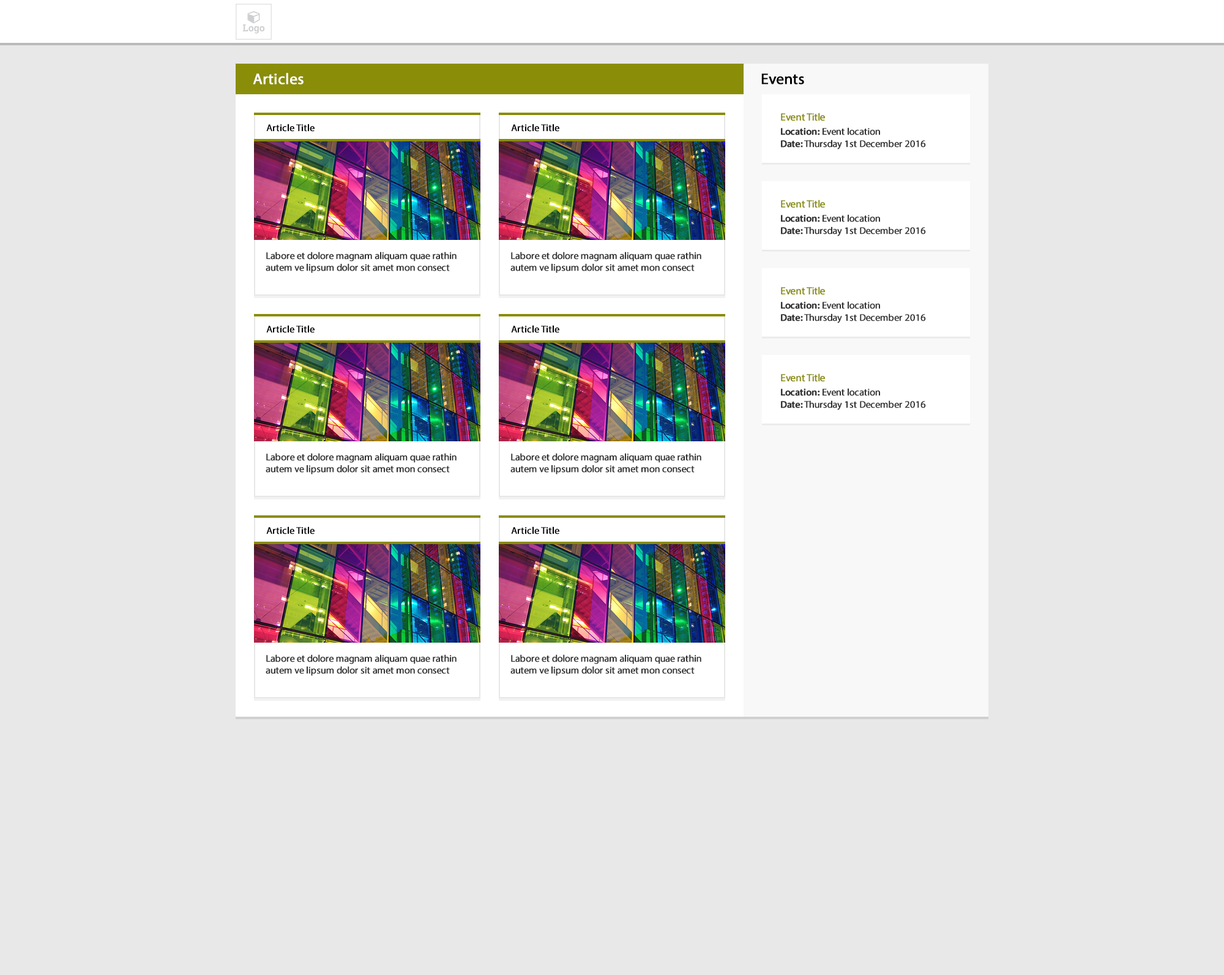
<style>
.page{position:relative;width:1224px;height:975px;background:#e8e8e8}
.page>*{position:absolute;margin:0}
.t1{font:15.3px "MyriadPro-Regular";color:#ffffff;font-weight:bold}
.t2{font:15.3px "MyriadPro-Regular";color:#000000;font-weight:bold}
.t3{font:10.4px "MyriadPro-Regular";letter-spacing:-0.02em;color:#8a8d08;font-weight:bold}
.t4{font:9.8px "MyriadPro-Regular";color:#000000;font-weight:bold}
.t5{font:9.8px "MyriadPro-Regular";letter-spacing:-0.02em;color:#333333;font-weight:bold}
.t6{font:9.8px "MyriadPro-Semibold";letter-spacing:-0.02em;color:#333333;font-weight:bold}
</style>
<div class="page">
<p class="t1" style="left:253px;top:73px;width:50px;height:11px">Articles</p>
<p class="t2" style="left:761px;top:73px;width:43px;height:11px">Events</p>
<p class="t3" style="left:781px;top:113px;width:44px;height:8px">Event Title</p>
<p class="t4" style="left:266px;top:124px;width:48px;height:8px">Article Title</p>
<p class="t4" style="left:511px;top:124px;width:48px;height:8px">Article Title</p>
<p class="t5" style="left:781px;top:127px;width:99px;height:8px"><span class="t6">Location:</span> Event location</p>
<p class="t5" style="left:781px;top:139px;width:145px;height:10px"><span class="t6">Date:</span> Thursday 1st December 2016</p>
<p class="t3" style="left:781px;top:199px;width:44px;height:9px">Event Title</p>
<p class="t5" style="left:781px;top:214px;width:99px;height:8px"><span class="t6">Location:</span> Event location</p>
<p class="t5" style="left:781px;top:226px;width:145px;height:10px"><span class="t6">Date:</span> Thursday 1st December 2016</p>
<p class="t5" style="left:266px;top:251px;width:190px;height:22px">Labore et dolore magnam aliquam quae rathin autem ve lipsum dolor sit amet mon consect</p>
<p class="t5" style="left:510px;top:251px;width:191px;height:22px">Labore et dolore magnam aliquam quae rathin autem ve lipsum dolor sit amet mon consect</p>
<p class="t3" style="left:781px;top:286px;width:44px;height:9px">Event Title</p>
<p class="t5" style="left:781px;top:301px;width:99px;height:8px"><span class="t6">Location:</span> Event location</p>
<p class="t5" style="left:781px;top:313px;width:145px;height:10px"><span class="t6">Date:</span> Thursday 1st December 2016</p>
<p class="t4" style="left:266px;top:325px;width:48px;height:8px">Article Title</p>
<p class="t4" style="left:511px;top:325px;width:48px;height:8px">Article Title</p>
<p class="t3" style="left:781px;top:373px;width:44px;height:9px">Event Title</p>
<p class="t5" style="left:781px;top:388px;width:99px;height:8px"><span class="t6">Location:</span> Event location</p>
<p class="t5" style="left:781px;top:400px;width:145px;height:10px"><span class="t6">Date:</span> Thursday 1st December 2016</p>
<p class="t5" style="left:266px;top:453px;width:190px;height:21px">Labore et dolore magnam aliquam quae rathin autem ve lipsum dolor sit amet mon consect</p>
<p class="t5" style="left:510px;top:453px;width:191px;height:21px">Labore et dolore magnam aliquam quae rathin autem ve lipsum dolor sit amet mon consect</p>
<p class="t4" style="left:266px;top:526px;width:48px;height:8px">Article Title</p>
<p class="t4" style="left:511px;top:526px;width:48px;height:8px">Article Title</p>
<p class="t5" style="left:266px;top:654px;width:190px;height:21px">Labore et dolore magnam aliquam quae rathin autem ve lipsum dolor sit amet mon consect</p>
<p class="t5" style="left:510px;top:654px;width:191px;height:21px">Labore et dolore magnam aliquam quae rathin autem ve lipsum dolor sit amet mon consect</p>
</div>
